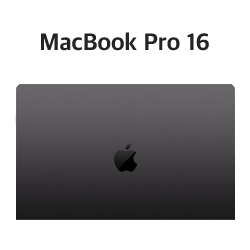
<style>
.page{position:relative;width:250px;height:250px;background:#ffffff}
.page>*{position:absolute;margin:0}
.t1{font:24px "AppleSDGothicNeoEB00";color:#242424}
</style>
<div class="page">
<p class="t1" style="left:41px;top:32px;width:168px;height:19px">MacBook Pro 16</p>
</div>
